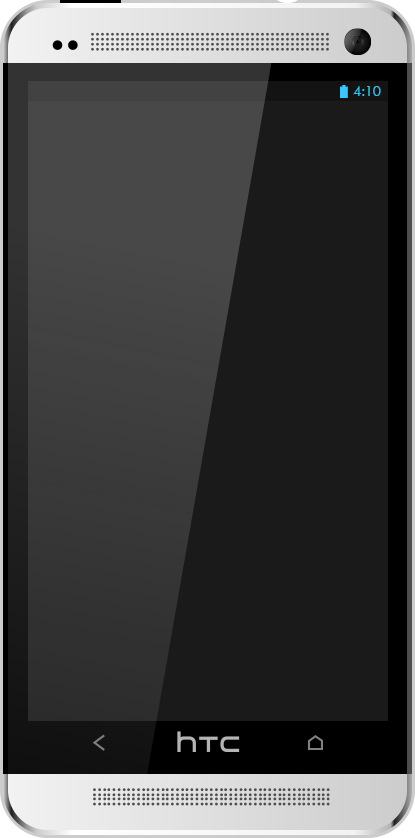
<style>
.page{position:relative;width:415px;height:838px;background:#1a1a1a}
.page>*{position:absolute;margin:0}
.t1{font:13.8px "CenturyGothic";color:#27c6f0}
</style>
<div class="page">
<p class="t1" style="left:353px;top:86px;width:28px;height:10px">4:10</p>
</div>
